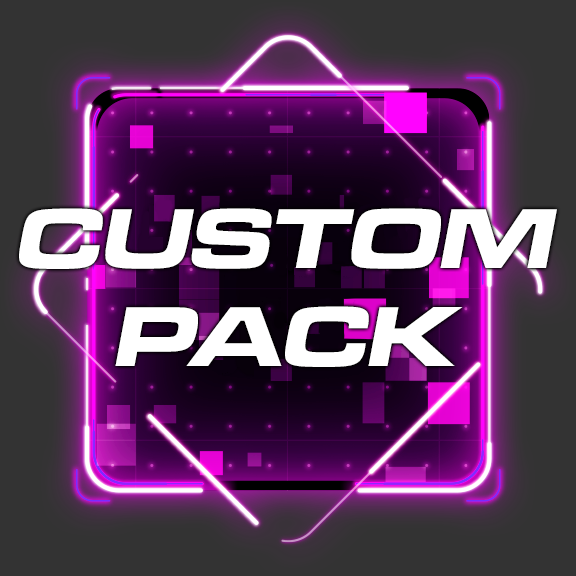
<style>
.page{position:relative;width:576px;height:576px;background:#333333}
.page>*{position:absolute;margin:0}
.t1{font:88px "MicrogrammaD-BoldExte";color:#ffffff;font-style:italic;scale:1.06 1}
</style>
<div class="page">
<p class="t1" style="left:19px;top:208px;width:538px;height:61px">CUSTOM</p>
<p class="t1" style="left:115px;top:306px;width:348px;height:61px">PACK</p>
</div>
